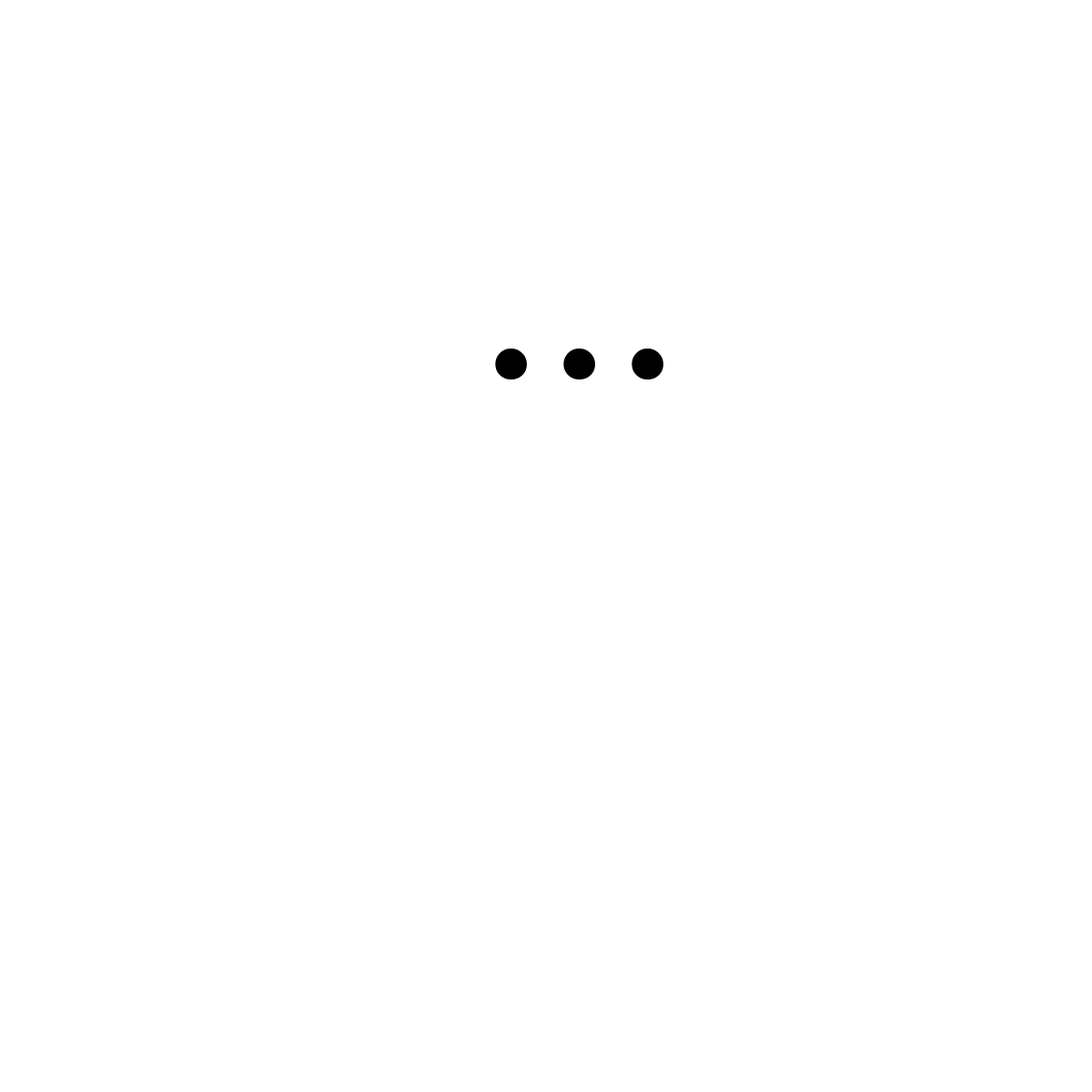
<style>
.page{position:relative;width:1092px;height:1092px;background:#ffffff}
.page>*{position:absolute;margin:0}
.t1{font:273px "KalpurushANSI";color:#000000}
</style>
<div class="page">
<p class="t1" style="left:495px;top:349px;width:168px;height:30px">...</p>
</div>
